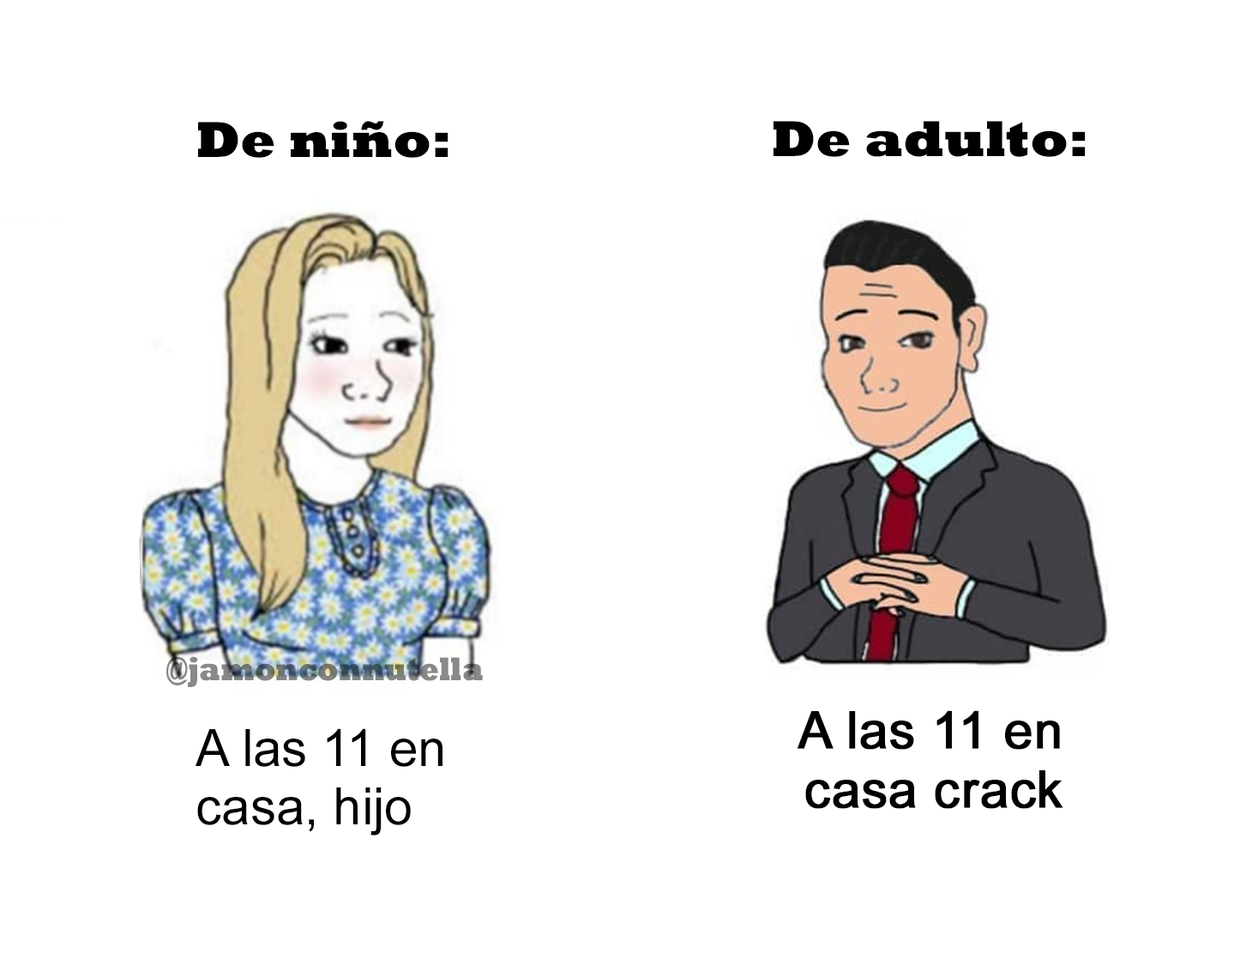
<style>
.page{position:relative;width:1252px;height:953px;background:#ffffff}
.page>*{position:absolute;margin:0}
.t1{font:51.4px "Rockwell-ExtraBold";color:#000000}
.t2{font:33.6px "Rockwell-ExtraBold";scale:0.84 1}
.t3{font:51.4px "ArialMT";color:#000000;font-weight:bold}
.t4{font:51.4px "ArialMT";color:#000000}
</style>
<div class="page">
<p class="t1" style="left:198px;top:121px;width:250px;height:37px">De niño:</p>
<p class="t1" style="left:773px;top:121px;width:312px;height:36px">De adulto:</p>
<p class="t2" style="left:166px;top:656px;width:317px;height:31px">@jamonconnutella</p>
<p class="t3" style="left:797px;top:710px;width:266px;height:99px;text-align:right">A las 11 en<br>casa crack</p>
<p class="t4" style="left:195px;top:728px;width:247px;height:107px">A las 11 en<br>casa, hijo</p>
</div>
